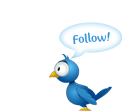
<style>
.page{position:relative;width:122px;height:111px;background:#ffffff}
.page>*{position:absolute;margin:0}
.t1{font:14px "Digitalis";color:#3796dd}
.t2{font:14px "Digitalis";color:#3796dd;font-style:italic}
</style>
<div class="page">
<p class="t1" style="left:73px;top:32px;width:37px;height:13px;rotate:-5deg">Follow<span class="t2">!</span></p>
</div>
